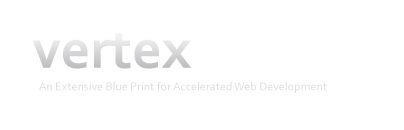
<style>
.page{position:relative;width:404px;height:130px;background:#ffffff}
.page>*{position:absolute;margin:0}
.t1{font:57.5px "Corbel-Bold";color:#d6d6d8}
.t2{font:12.1px "Corbel";color:#e0dede}
</style>
<div class="page">
<p class="t1" style="left:32px;top:33px;width:159px;height:36px">vertex</p>
<p class="t2" style="left:39px;top:81px;width:288px;height:12px">An Extensive Blue Print for Accelerated Web Development</p>
</div>
